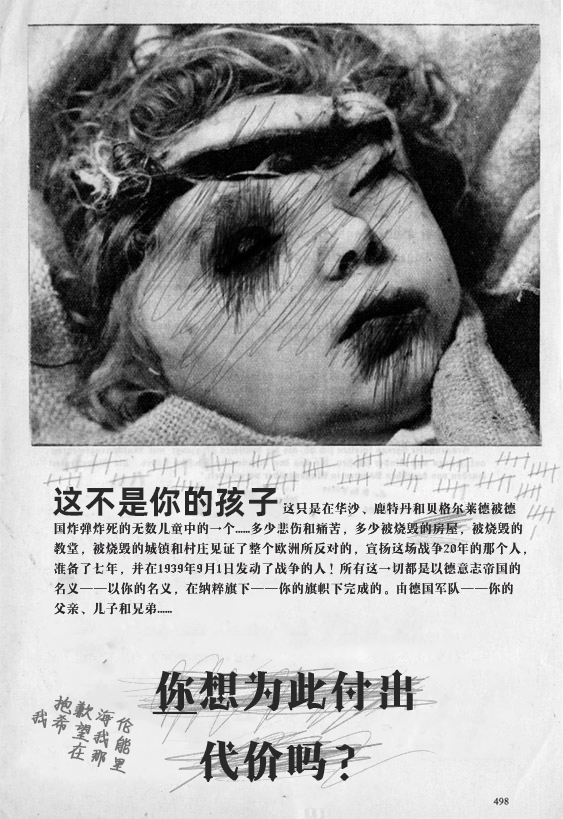
<style>
.page{position:relative;width:563px;height:819px}
.page>*{position:absolute;margin:0}
.t1{font:33px "AlibabaPuHuiTiB";color:#292929}
.t2{font:13px/20px "AaDracula";color:#292529}
.t3{font:43px/70px "AaDracula";color:#292929;font-weight:bold}
.t4{font:43px/70px "AaDracula";color:#292929;font-weight:bold;text-decoration:underline}
.t5{font:21px/20px "ShouShuti";color:#717171;font-weight:bold}
</style>
<div class="page">
<p class="t1" style="left:53px;top:486px;width:225px;height:32px">这不是你的孩子</p>
<p class="t2" style="left:54px;top:502px;width:473px;height:113px">这只是在华沙、鹿特丹和贝格尔莱德被德<br>国炸弹炸死的无数儿童中的一个......多少悲伤和痛苦，多少被烧毁的房屋，被烧毁的<br>教堂，被烧毁的城镇和村庄见证了整个欧洲所反对的，宣扬这场战争20年的那个人，<br>准备了七年，并在1939年9月1日发动了战争的人！所有这一切都是以德意志帝国的<br>名义——以你的名义，在纳粹旗下——你的旗帜下完成的。由德国军队——你的<br>父亲、儿子和兄弟......</p>
<p class="t3" style="left:152px;top:669px;width:261px;height:114px;text-align:center"><span class="t4">你</span>想为此付出<br>代价吗？</p>
<p class="t5" style="left:31px;top:695px;width:103px;height:79px;rotate:18deg">抱歉海伦<br>我希望我能<br>        在那里</p>
</div>
